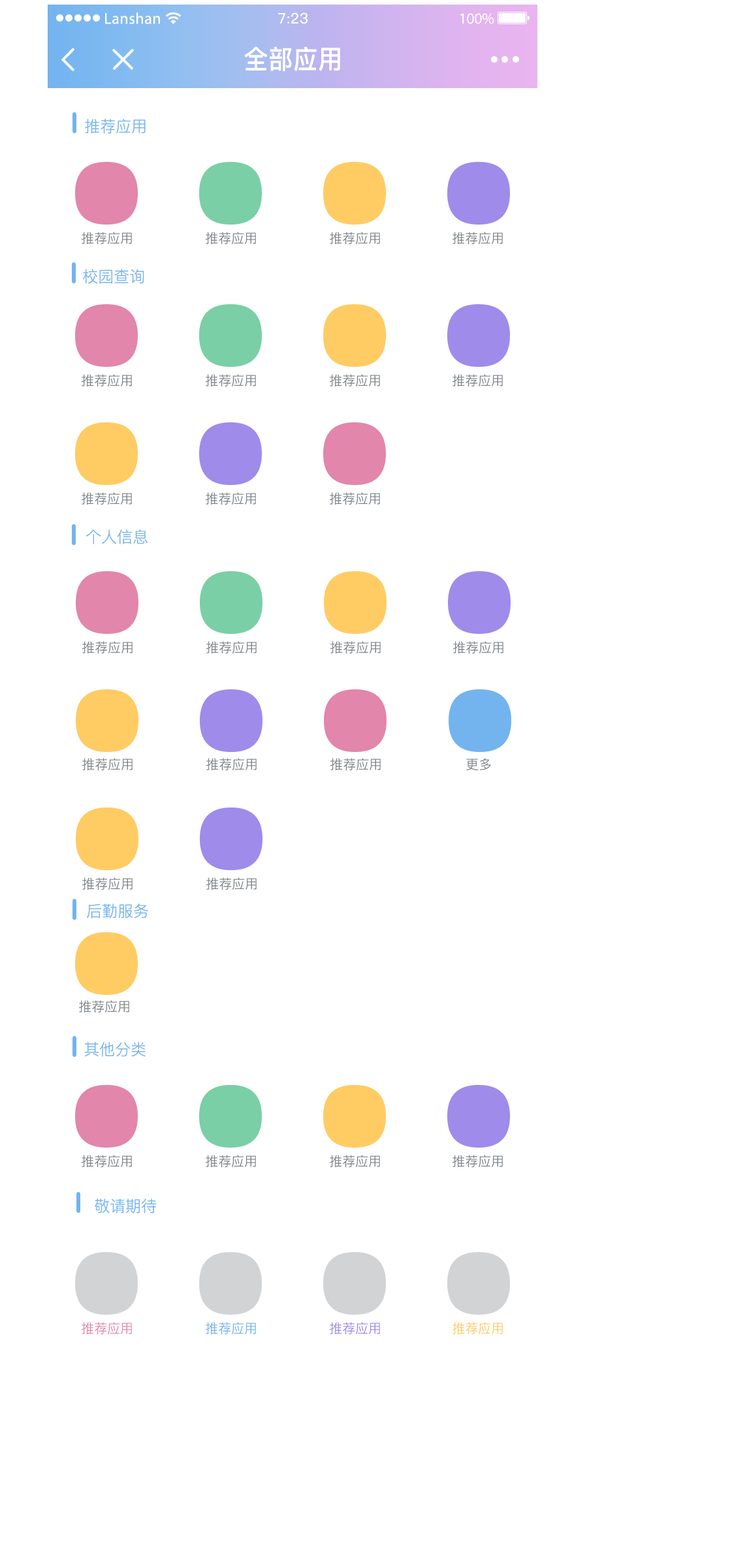
<style>
.page{position:relative;width:730px;height:1568px;background:#ffffff}
.page>*{position:absolute;margin:0}
.t1{font:15.7px "MyriadPro-Regular";color:#ffffff}
.t2{font:14.4px "PingFang-SC-Medium";color:#ffffff}
.t3{font:15.7px "MyriadPro-Regular";letter-spacing:-0.02em;color:#ffffff}
.t4{font:26.1px "PingFang-SC-Bold";color:#ffffff;scale:0.93 1}
.t5{font:15.7px "PingFang-SC-Regular";color:#73b4ef}
.t6{font:13.1px "PingFang-SC-Regular";color:#7f848a}
.t7{font:13.1px "PingFang-SC-Regular";color:#e286ab}
.t8{font:13.1px "PingFang-SC-Regular";color:#73b4ef}
.t9{font:13.1px "PingFang-SC-Regular";color:#9f8bea}
.t10{font:13.1px "PingFang-SC-Regular";color:#ffcb63}
</style>
<div class="page">
<p class="t1" style="left:105px;top:12px;width:55px;height:12px">Lanshan</p>
<p class="t2" style="left:278px;top:12px;width:29px;height:12px">7:23</p>
<p class="t3" style="left:460px;top:13px;width:34px;height:11px">100%</p>
<p class="t4" style="left:244px;top:46px;width:96px;height:25px">全部应用</p>
<p class="t5" style="left:85px;top:119px;width:61px;height:15px">推荐应用</p>
<p class="t6" style="left:82px;top:232px;width:50px;height:12px">推荐应用</p>
<p class="t6" style="left:206px;top:232px;width:50px;height:12px">推荐应用</p>
<p class="t6" style="left:330px;top:232px;width:50px;height:12px">推荐应用</p>
<p class="t6" style="left:452px;top:232px;width:51px;height:12px">推荐应用</p>
<p class="t5" style="left:83px;top:269px;width:61px;height:15px">校园查询</p>
<p class="t6" style="left:82px;top:374px;width:50px;height:12px">推荐应用</p>
<p class="t6" style="left:206px;top:374px;width:50px;height:12px">推荐应用</p>
<p class="t6" style="left:330px;top:374px;width:50px;height:12px">推荐应用</p>
<p class="t6" style="left:452px;top:374px;width:51px;height:12px">推荐应用</p>
<p class="t6" style="left:82px;top:492px;width:50px;height:13px">推荐应用</p>
<p class="t6" style="left:206px;top:492px;width:50px;height:13px">推荐应用</p>
<p class="t6" style="left:330px;top:492px;width:50px;height:13px">推荐应用</p>
<p class="t5" style="left:86px;top:529px;width:62px;height:15px">个人信息</p>
<p class="t6" style="left:82px;top:641px;width:51px;height:12px">推荐应用</p>
<p class="t6" style="left:206px;top:641px;width:51px;height:12px">推荐应用</p>
<p class="t6" style="left:330px;top:641px;width:51px;height:12px">推荐应用</p>
<p class="t6" style="left:453px;top:641px;width:50px;height:12px">推荐应用</p>
<p class="t6" style="left:82px;top:758px;width:51px;height:12px">推荐应用</p>
<p class="t6" style="left:206px;top:758px;width:51px;height:12px">推荐应用</p>
<p class="t6" style="left:330px;top:758px;width:51px;height:12px">推荐应用</p>
<p class="t6" style="left:466px;top:758px;width:25px;height:12px">更多</p>
<p class="t6" style="left:82px;top:877px;width:51px;height:13px">推荐应用</p>
<p class="t6" style="left:206px;top:877px;width:51px;height:13px">推荐应用</p>
<p class="t5" style="left:87px;top:903px;width:62px;height:15px">后勤服务</p>
<p class="t6" style="left:79px;top:1000px;width:50px;height:12px">推荐应用</p>
<p class="t5" style="left:84px;top:1042px;width:62px;height:15px">其他分类</p>
<p class="t6" style="left:82px;top:1155px;width:50px;height:12px">推荐应用</p>
<p class="t6" style="left:206px;top:1155px;width:50px;height:12px">推荐应用</p>
<p class="t6" style="left:330px;top:1155px;width:50px;height:12px">推荐应用</p>
<p class="t6" style="left:452px;top:1155px;width:51px;height:12px">推荐应用</p>
<p class="t5" style="left:95px;top:1199px;width:62px;height:15px">敬请期待</p>
<p class="t7" style="left:82px;top:1322px;width:50px;height:12px">推荐应用</p>
<p class="t8" style="left:206px;top:1322px;width:50px;height:12px">推荐应用</p>
<p class="t9" style="left:330px;top:1322px;width:50px;height:12px">推荐应用</p>
<p class="t10" style="left:452px;top:1322px;width:51px;height:12px">推荐应用</p>
</div>
